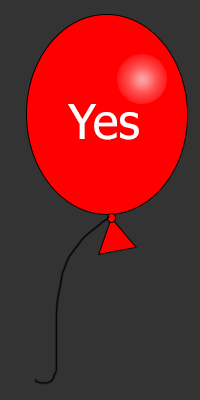
<style>
.page{position:relative;width:200px;height:400px;background:#333333}
.page>*{position:absolute;margin:0}
.t1{font:48px "Tahoma";color:#ffffff}
</style>
<div class="page">
<p class="t1" style="left:68px;top:104px;width:71px;height:36px">Yes</p>
</div>
